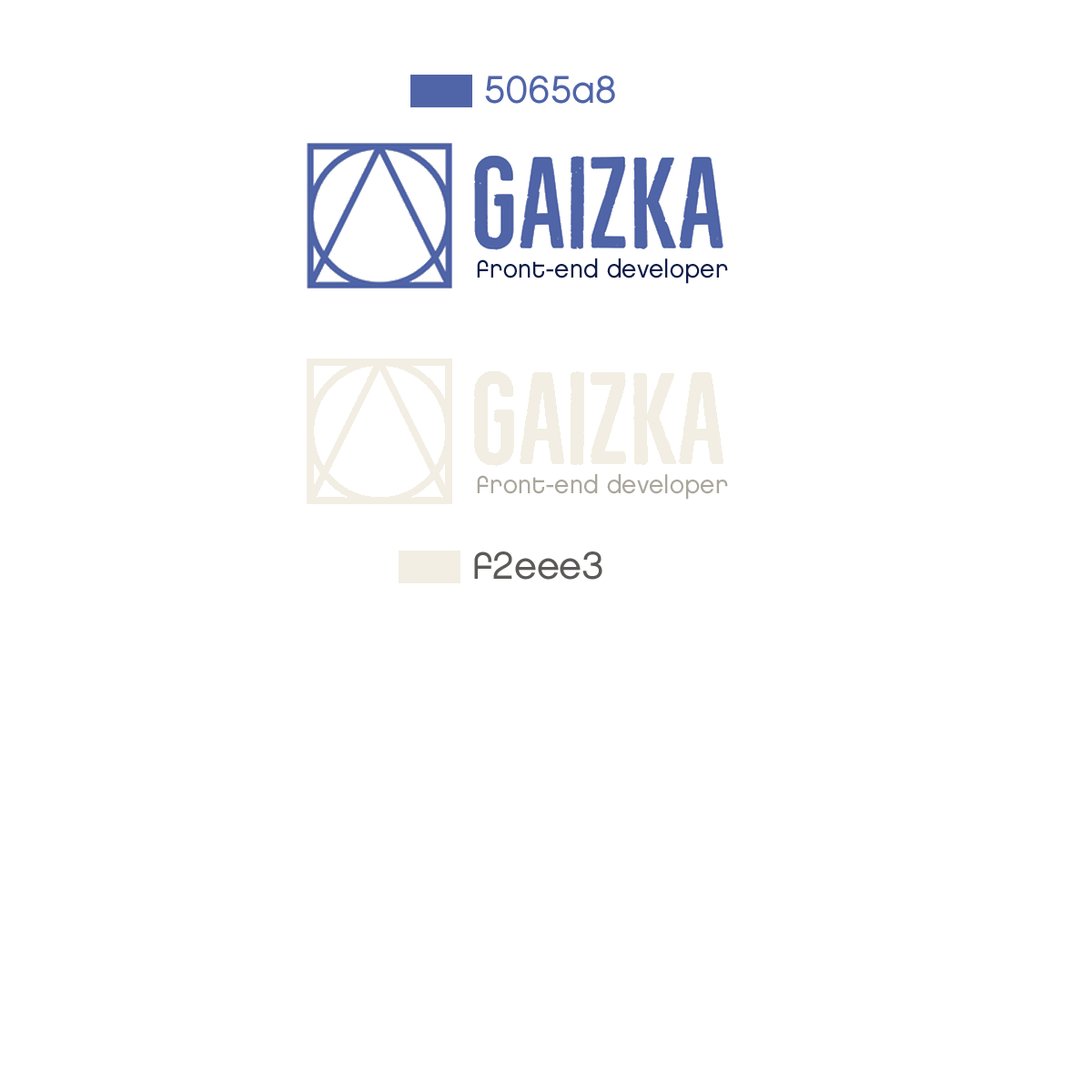
<style>
.page{position:relative;width:1092px;height:1092px;background:#ffffff}
.page>*{position:absolute;margin:0}
.t1{font:38.5px "Chalet-LondonNineteenEighty";color:#5065a8}
.t2{font:25.3px "Chalet-LondonNineteenEighty";color:#0d1b48}
.t3{font:25.3px "Chalet-LondonNineteenEighty";color:#aaa69b}
.t4{font:38.5px "Chalet-LondonNineteenEighty";color:#5b5a57}
</style>
<div class="page">
<p class="t1" style="left:485px;top:76px;width:130px;height:28px">5065a8</p>
<p class="t2" style="left:477px;top:258px;width:251px;height:26px">front-end developer</p>
<p class="t3" style="left:477px;top:474px;width:251px;height:26px">front-end developer</p>
<p class="t4" style="left:474px;top:551px;width:128px;height:29px">f2eee3</p>
</div>
